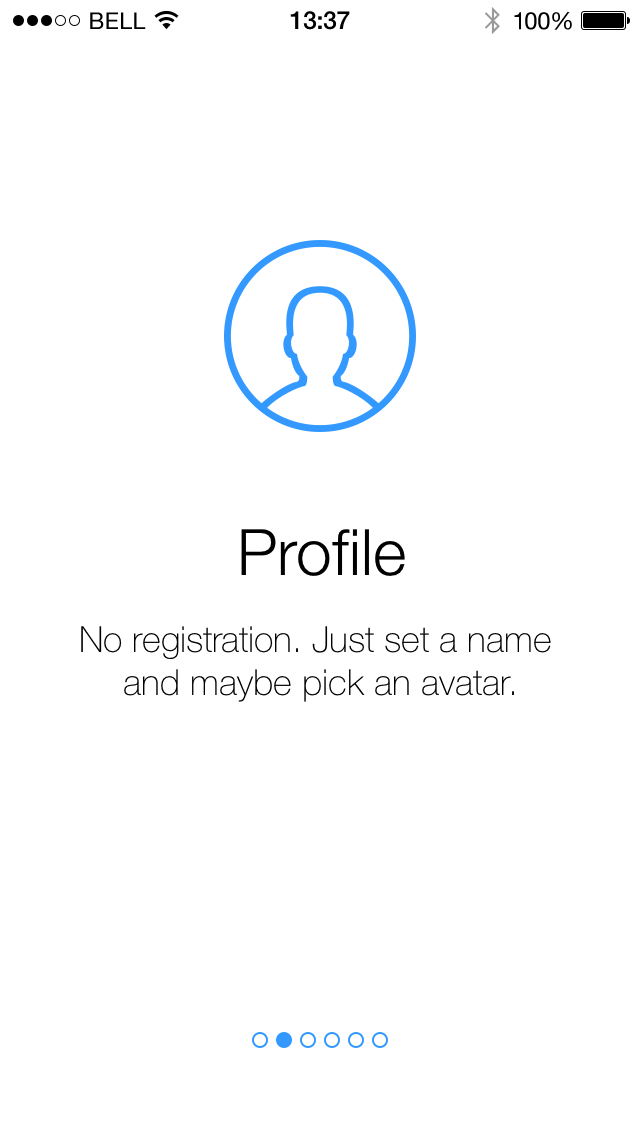
<style>
.page{position:relative;width:640px;height:1136px;background:#ffffff}
.page>*{position:absolute;margin:0}
.t1{font:64px "HelveticaNeue-Light";color:#000000}
.t2{font:36px "HelveticaNeue-Thin";color:#000000}
</style>
<div class="page">
<p class="t1" style="left:241px;top:529px;width:164px;height:47px">Profile</p>
<p class="t2" style="left:81px;top:626px;width:470px;height:76px;text-align:center">No registration. Just set a name <br>and maybe pick an avatar.</p>
</div>
